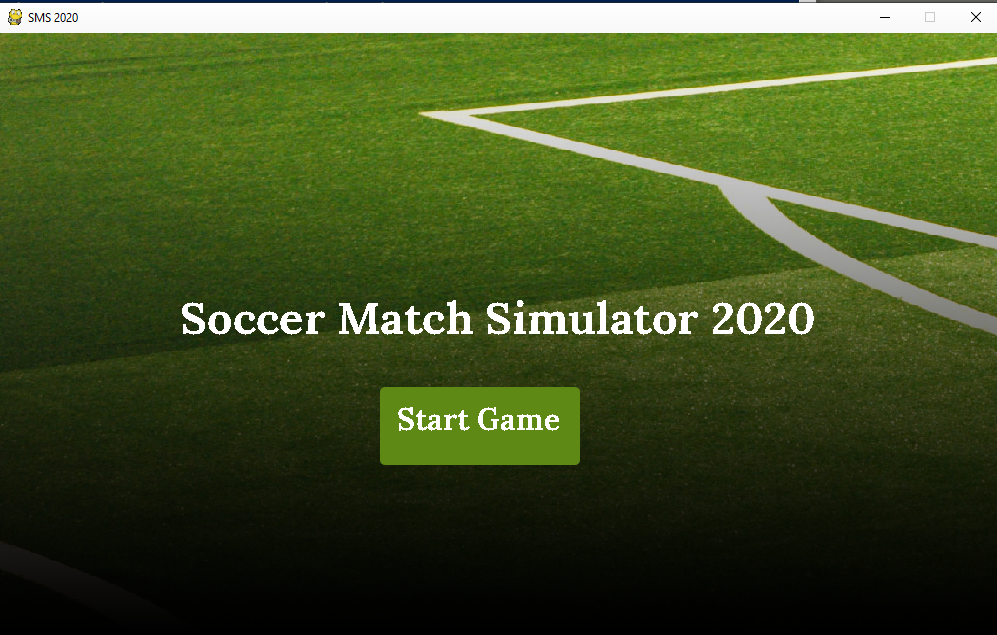
<style>
.page{position:relative;width:997px;height:635px}
.page>*{position:absolute;margin:0}
.t1{font:45px "Lora-Bold";color:#ffffff}
.t2{font:30px "Lora-Bold";color:#ffffff}
</style>
<div class="page">
<p class="t1" style="left:182px;top:300px;width:632px;height:35px">Soccer Match Simulator 2020</p>
<p class="t2" style="left:398px;top:407px;width:161px;height:24px">Start Game</p>
</div>
